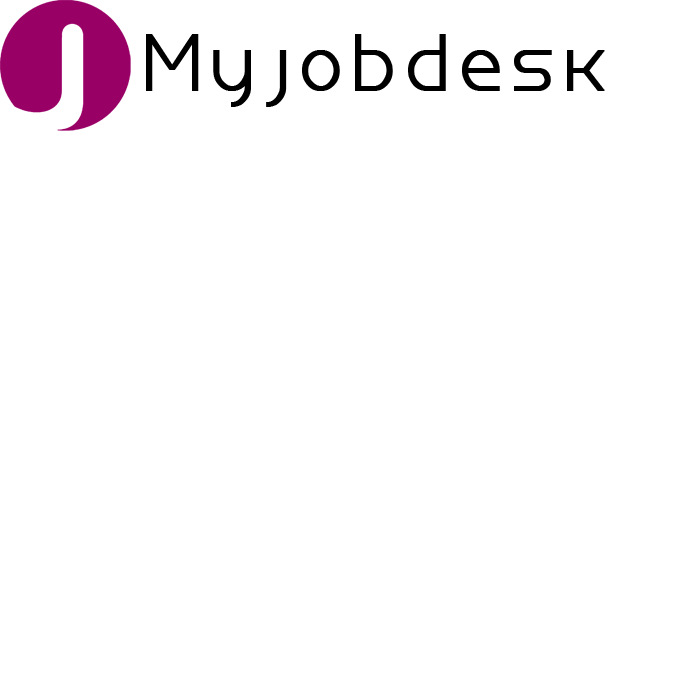
<style>
.page{position:relative;width:684px;height:684px;background:#ffffff}
.page>*{position:absolute;margin:0}
.t1{font:80px "KolnMesseDeutz";letter-spacing:0.14em;color:#000000;font-weight:bold}
</style>
<div class="page">
<p class="t1" style="left:146px;top:34px;width:459px;height:73px">Myjobdesk</p>
</div>
